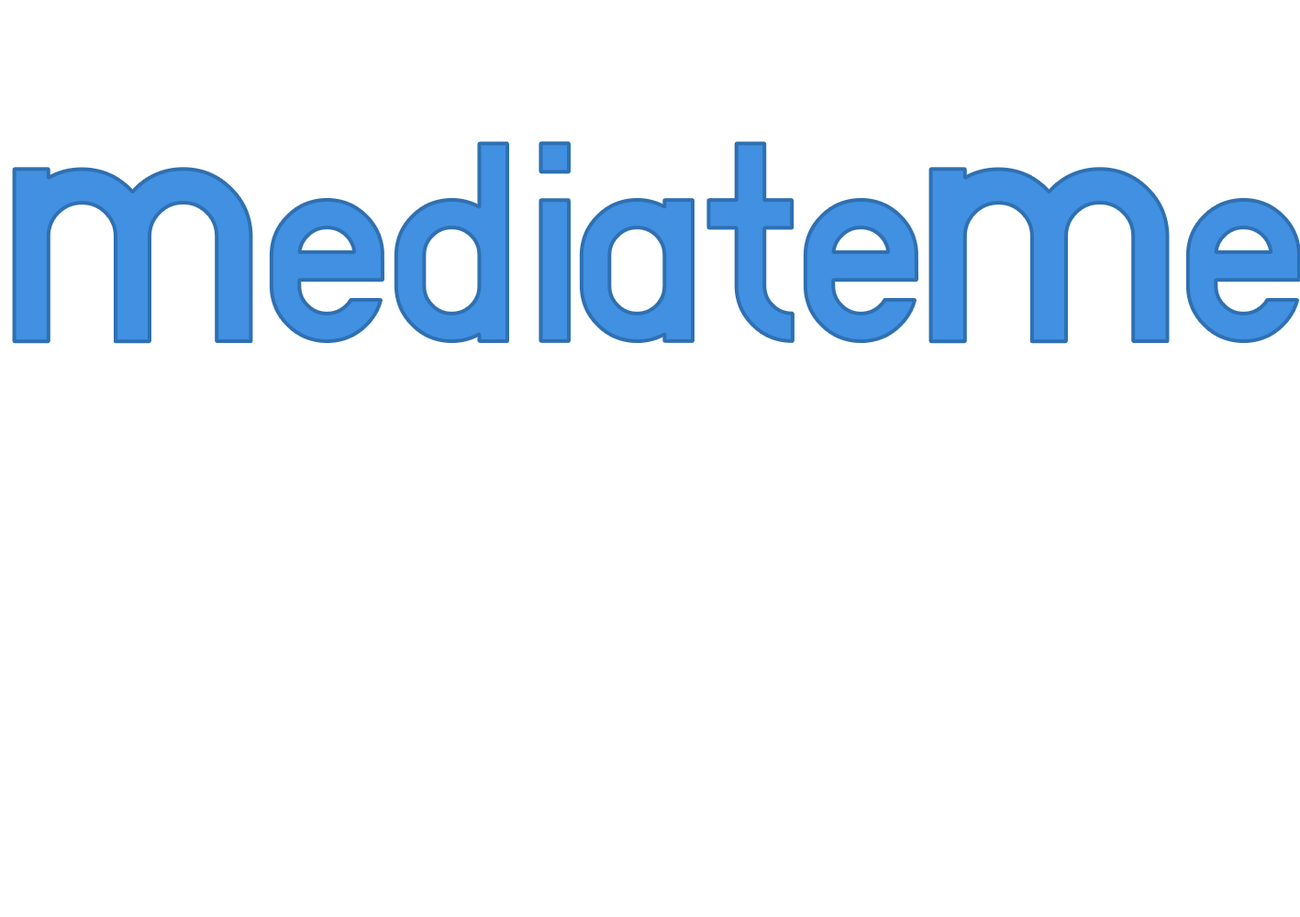
<style>
.page{position:relative;width:1300px;height:917px;background:#ffffff}
.page>*{position:absolute;margin:0}
.t1{font:282.5px "LeipzigerMesse";color:#4190e1}
.t2{font:344px "LeipzigerMesse";color:#4190e1}
</style>
<div class="page">
<p class="t1" style="left:14px;top:143px;width:1285px;height:199px"><span class="t2">m</span>ediate<span class="t2">m</span>e</p>
</div>
